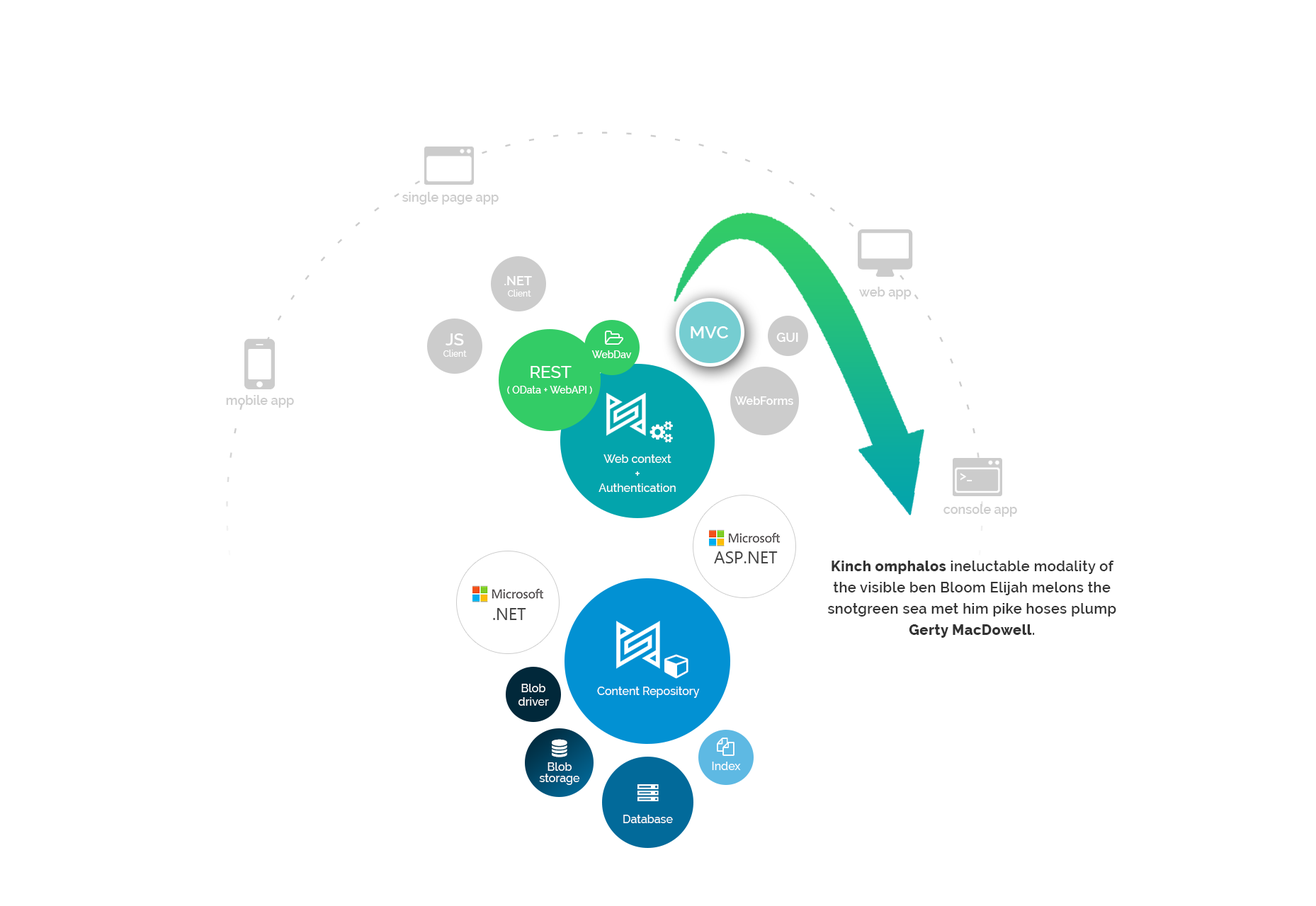
<style>
.page{position:relative;width:1316px;height:906px;background:#ffffff}
.page>*{position:absolute;margin:0}
.t1{font:12.7px "Raleway-SemiBold";color:#cccccc}
.t2{font:8.5px/11.3px "Raleway-Medium";color:#ffffff}
.t3{font:12.7px/11.3px "Raleway-SemiBold";color:#ffffff}
.t4{font:17.7px "Raleway-SemiBold";color:#ffffff}
.t5{font:17px/11.3px "Raleway-SemiBold";color:#ffffff}
.t6{font:12.7px "Raleway-SemiBold";color:#ffffff}
.t7{font:9.9px "Raleway-Medium";color:#ffffff}
.t8{font:17px "Raleway-Medium";color:#ffffff}
.t9{font:11.3px "Raleway-SemiBold";color:#ffffff}
.t10{font:11.3px "Raleway-Medium";color:#ffffff}
.t11{font:12.7px "Raleway-Medium";color:#ffffff}
.t12{font:17px "SegoeUI";color:#444444}
.t13{font:14.2px/21.2px "Raleway-SemiBold";letter-spacing:0.025em;color:#333333}
.t14{font:14.2px/21.2px "Raleway-ExtraBold";letter-spacing:0.025em;color:#333333}
.t15{font:11.3px/11.3px "Raleway-Medium";color:#ffffff}
</style>
<div class="page">
<p class="t1" style="left:402px;top:192px;width:96px;height:13px">single page app</p>
<p class="t2" style="left:504px;top:276px;width:28px;height:21px;text-align:center"><span class="t3">.NET <br></span>Client</p>
<p class="t1" style="left:859px;top:287px;width:52px;height:13px">web app</p>
<p class="t4" style="left:690px;top:326px;width:38px;height:12px">MVC</p>
<p class="t2" style="left:443px;top:334px;width:24px;height:23px;text-align:center"><span class="t5">JS<br></span>Client</p>
<p class="t6" style="left:776px;top:333px;width:22px;height:9px">GUI</p>
<p class="t7" style="left:591px;top:351px;width:41px;height:7px">WebDav</p>
<p class="t8" style="left:530px;top:366px;width:41px;height:12px">REST</p>
<p class="t7" style="left:507px;top:386px;width:85px;height:8px">( OData + WebAPI )</p>
<p class="t1" style="left:226px;top:395px;width:68px;height:13px">mobile app</p>
<p class="t9" style="left:734px;top:397px;width:59px;height:8px">WebForms</p>
<p class="t10" style="left:598px;top:455px;width:78px;height:37px;text-align:center">Web context<br><span class="t11">+<br></span>Authentication</p>
<p class="t6" style="left:959px;top:473px;width:13px;height:9px">&gt;_</p>
<p class="t1" style="left:943px;top:504px;width:74px;height:13px">console app</p>
<p class="t12" style="left:714px;top:552px;width:63px;height:12px">ASP.NET</p>
<p class="t13" style="left:828px;top:561px;width:288px;height:77px;text-align:center"><span class="t14">Kinch omphalos</span> ineluctable modality of the visible ben Bloom Elijah melons the snotgreen sea met him pike hoses plump <span class="t14">Gerty MacDowell</span>.</p>
<p class="t12" style="left:493px;top:608px;width:33px;height:12px">.NET</p>
<p class="t10" style="left:518px;top:684px;width:31px;height:22px;text-align:center">Blob<br>driver</p>
<p class="t10" style="left:597px;top:687px;width:103px;height:11px">Content Repository</p>
<p class="t10" style="left:712px;top:762px;width:29px;height:8px">Index</p>
<p class="t15" style="left:539px;top:763px;width:41px;height:22px;text-align:center">Blob storage</p>
<p class="t10" style="left:623px;top:815px;width:50px;height:9px">Database</p>
</div>
